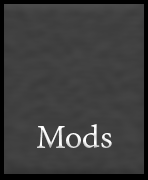
<style>
.page{position:relative;width:148px;height:180px}
.page>*{position:absolute;margin:0}
.t1{font:36px "AdobeDevanagari-Regular";color:#ffffff}
</style>
<div class="page">
<p class="t1" style="left:37px;top:124px;width:75px;height:24px">Mods</p>
</div>
